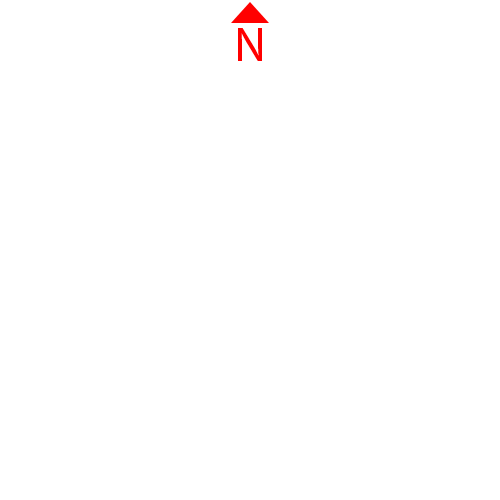
<style>
.page{position:relative;width:500px;height:500px;background:#ffffff}
.page>*{position:absolute;margin:0}
.t1{font:48px "MyriadPro-Regular";color:#ff0000}
</style>
<div class="page">
<p class="t1" style="left:238px;top:28px;width:24px;height:33px">N</p>
</div>
